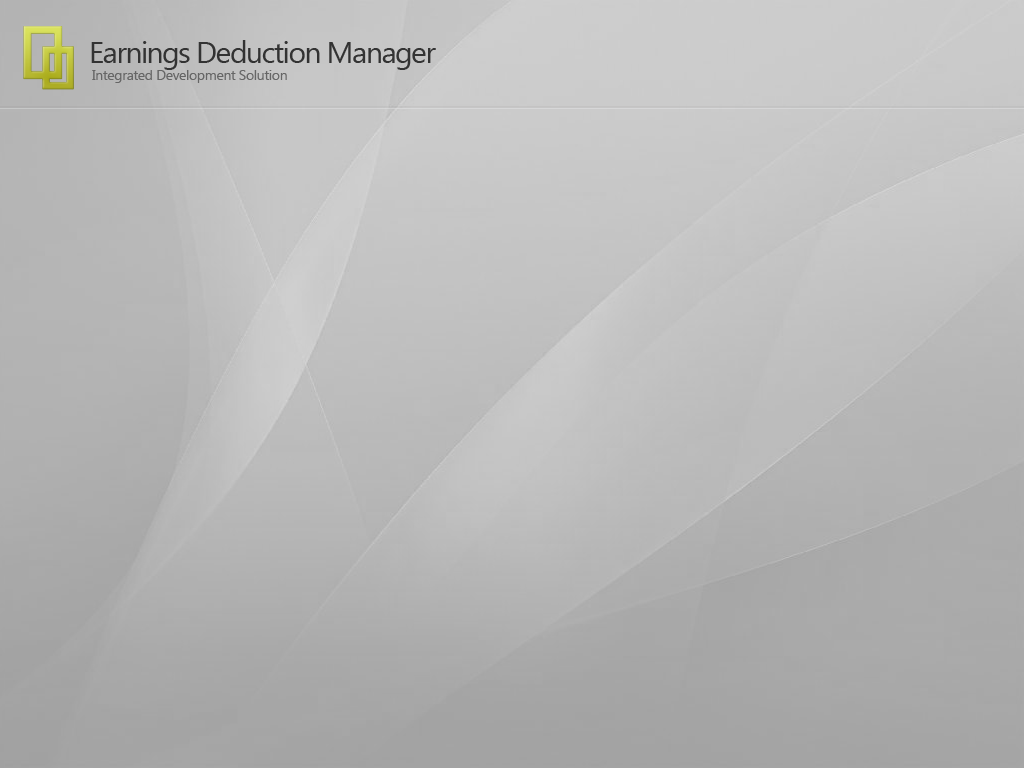
<style>
.page{position:relative;width:1024px;height:768px}
.page>*{position:absolute;margin:0}
.t1{font:30px "SegoeUI";letter-spacing:-0.05em;color:#333333}
.t2{font:14px "SegoeUI";letter-spacing:-0.025em;color:#666666}
</style>
<div class="page">
<p class="t1" style="left:91px;top:40px;width:345px;height:30px">Earnings Deduction Manager</p>
<p class="t2" style="left:92px;top:70px;width:195px;height:13px">Integrated Development Solution</p>
</div>
